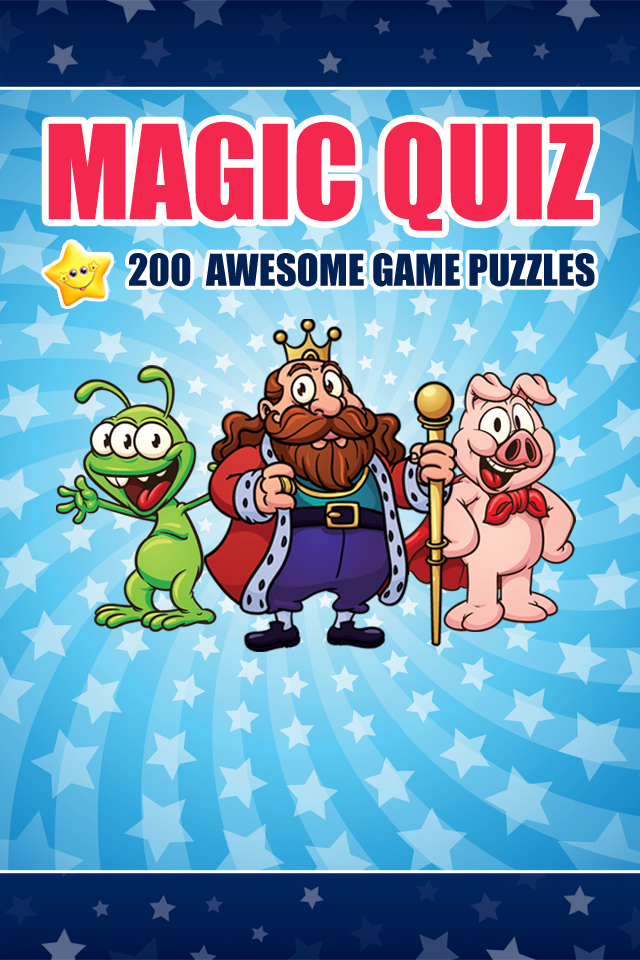
<style>
.page{position:relative;width:640px;height:960px}
.page>*{position:absolute;margin:0}
.t1{font:120.4px "Impact";color:#f4284f}
.t2{font:40.5px "Impact";color:#012155}
</style>
<div class="page">
<p class="t1" style="left:48px;top:121px;width:545px;height:110px">MAGIC QUIZ</p>
<p class="t2" style="left:129px;top:253px;width:466px;height:34px">200  AWESOME GAME PUZZLES</p>
</div>
